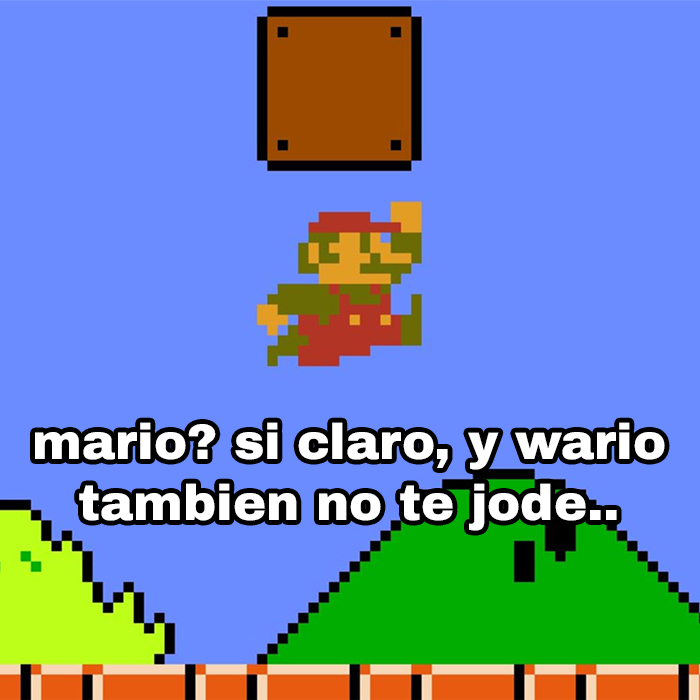
<style>
.page{position:relative;width:700px;height:700px;background:#6b8cff}
.page>*{position:absolute;margin:0}
.t1{font:49.7px "ArchivoBlack-Regular";color:#ffffff}
</style>
<div class="page">
<p class="t1" style="left:35px;top:422px;width:630px;height:109px;text-align:center">mario? si claro, y wario<br>tambien no te jode..</p>
</div>
